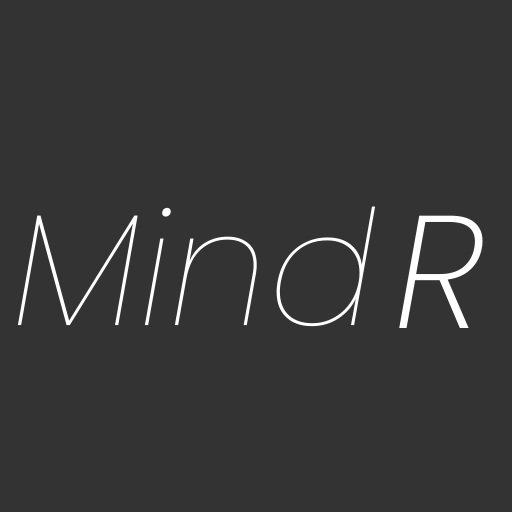
<style>
.page{position:relative;width:512px;height:512px;background:#333333}
.page>*{position:absolute;margin:0}
.t1{font:160px "Poppins-ThinItalic";color:#ffffff}
.t2{font:160px "Poppins-ExtraLightItalic";color:#ffffff}
</style>
<div class="page">
<p class="t1" style="left:17px;top:206px;width:359px;height:121px">Mind</p>
<p class="t2" style="left:399px;top:215px;width:84px;height:113px">R</p>
</div>
